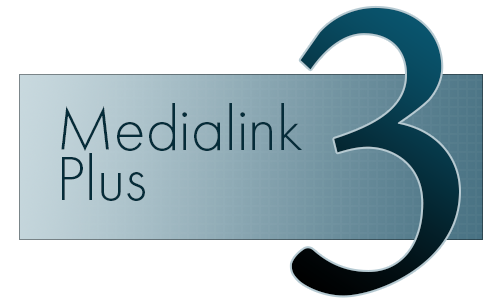
<style>
.page{position:relative;width:500px;height:307px;background:#ffffff}
.page>*{position:absolute;margin:0}
.t1{font:481px "AdobeDevanagari-Regular"}
.t2{font:65px/50px "FuturaEF-Light";color:#052c39}
</style>
<div class="page">
<p class="t1" style="left:291px;top:7px;width:168px;height:289px">3</p>
<p class="t2" style="left:61px;top:103px;width:241px;height:98px">Medialink<br>Plus</p>
</div>
